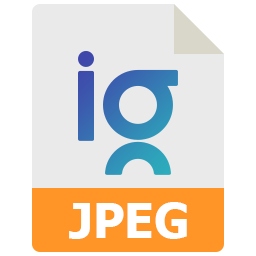
<style>
.page{position:relative;width:256px;height:256px;background:#eaeaea}
.page>*{position:absolute;margin:0}
.t1{font:48px "Tahoma-Bold";color:#ffffff}
</style>
<div class="page">
<p class="t1" style="left:69px;top:202px;width:118px;height:37px">JPEG</p>
</div>
